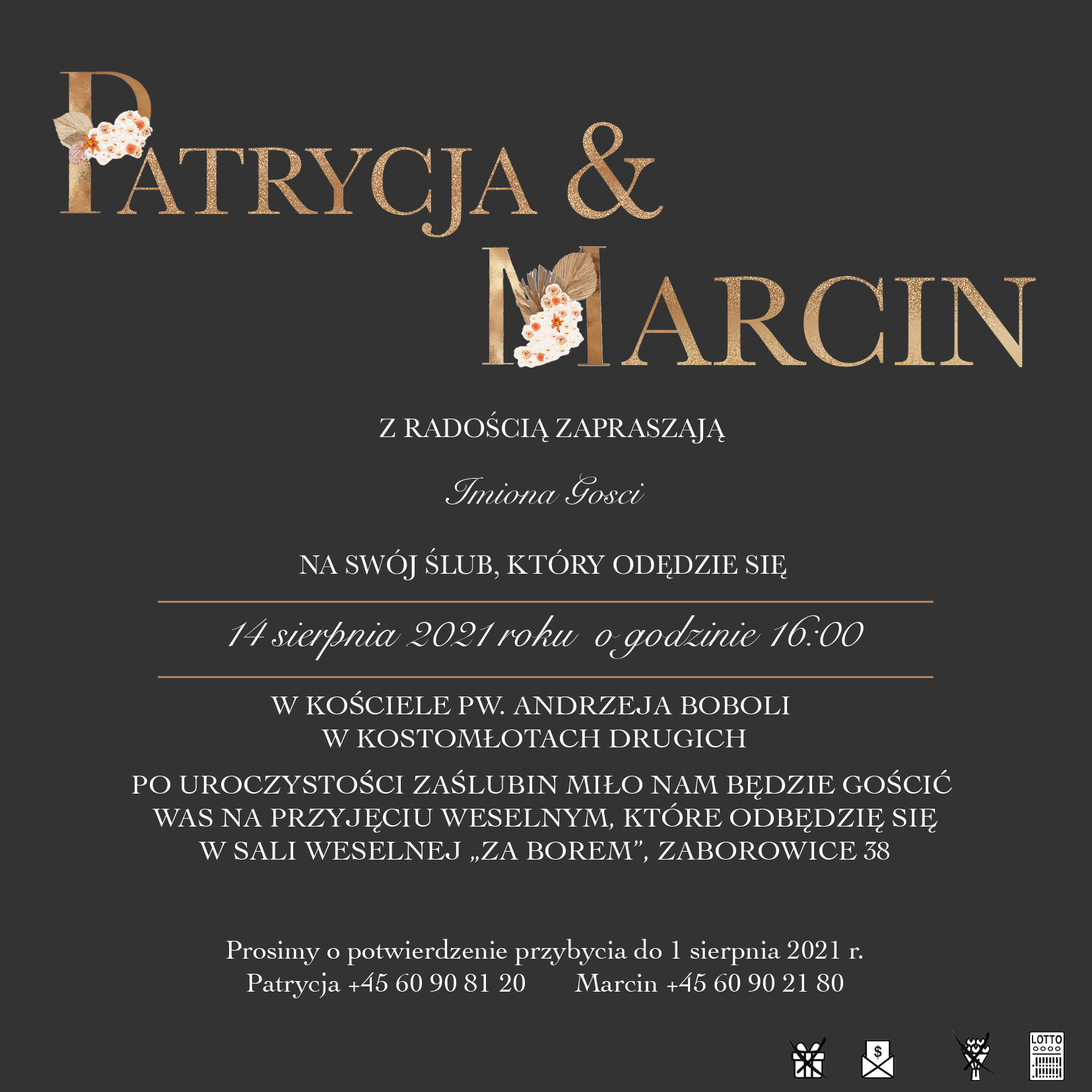
<style>
.page{position:relative;width:1092px;height:1092px;background:#333333}
.page>*{position:absolute;margin:0}
.t1{font:145.8px "Baskerville";color:#ab774e}
.t2{font:99px "Baskerville";color:#ab774e}
.t3{font:132px "Baskerville"}
.t4{font:38.5px "SnellRoundhand";color:#ffffff}
.t5{font:27.5px "Cochin";color:#ffffff}
</style>
<div class="page">
<p class="t1" style="left:567px;top:121px;width:97px;height:98px">&amp;</p>
<p class="t2" style="left:117px;top:147px;width:420px;height:91px">ATRYCJA</p>
<p class="t3" style="left:621px;top:276px;width:416px;height:92px">ARCIN</p>
<p class="t4" style="left:446px;top:473px;width:199px;height:31px">Imiona Gosci</p>
<p class="t5" style="left:270px;top:691px;width:520px;height:56px;text-align:center">W KOŚCIELE PW. ANDRZEJA BOBOLI <br>W KOSTOMŁOTACH DRUGICH</p>
<p class="t5" style="left:131px;top:770px;width:821px;height:228px;text-align:center">PO UROCZYSTOŚCI ZAŚLUBIN MIŁO NAM BĘDZIE GOŚCIĆ <br>WAS NA PRZYJĘCIU WESELNYM, KTÓRE ODBĘDZIĘ SIĘ<br>W SALI WESELNEJ „ZA BOREM”, ZABOROWICE 38<br><br><br>Prosimy o potwierdzenie przybycia do 1 sierpnia 2021 r.<br>Patrycja +45 60 90 81 20       Marcin +45 60 90 21 80</p>
</div>
